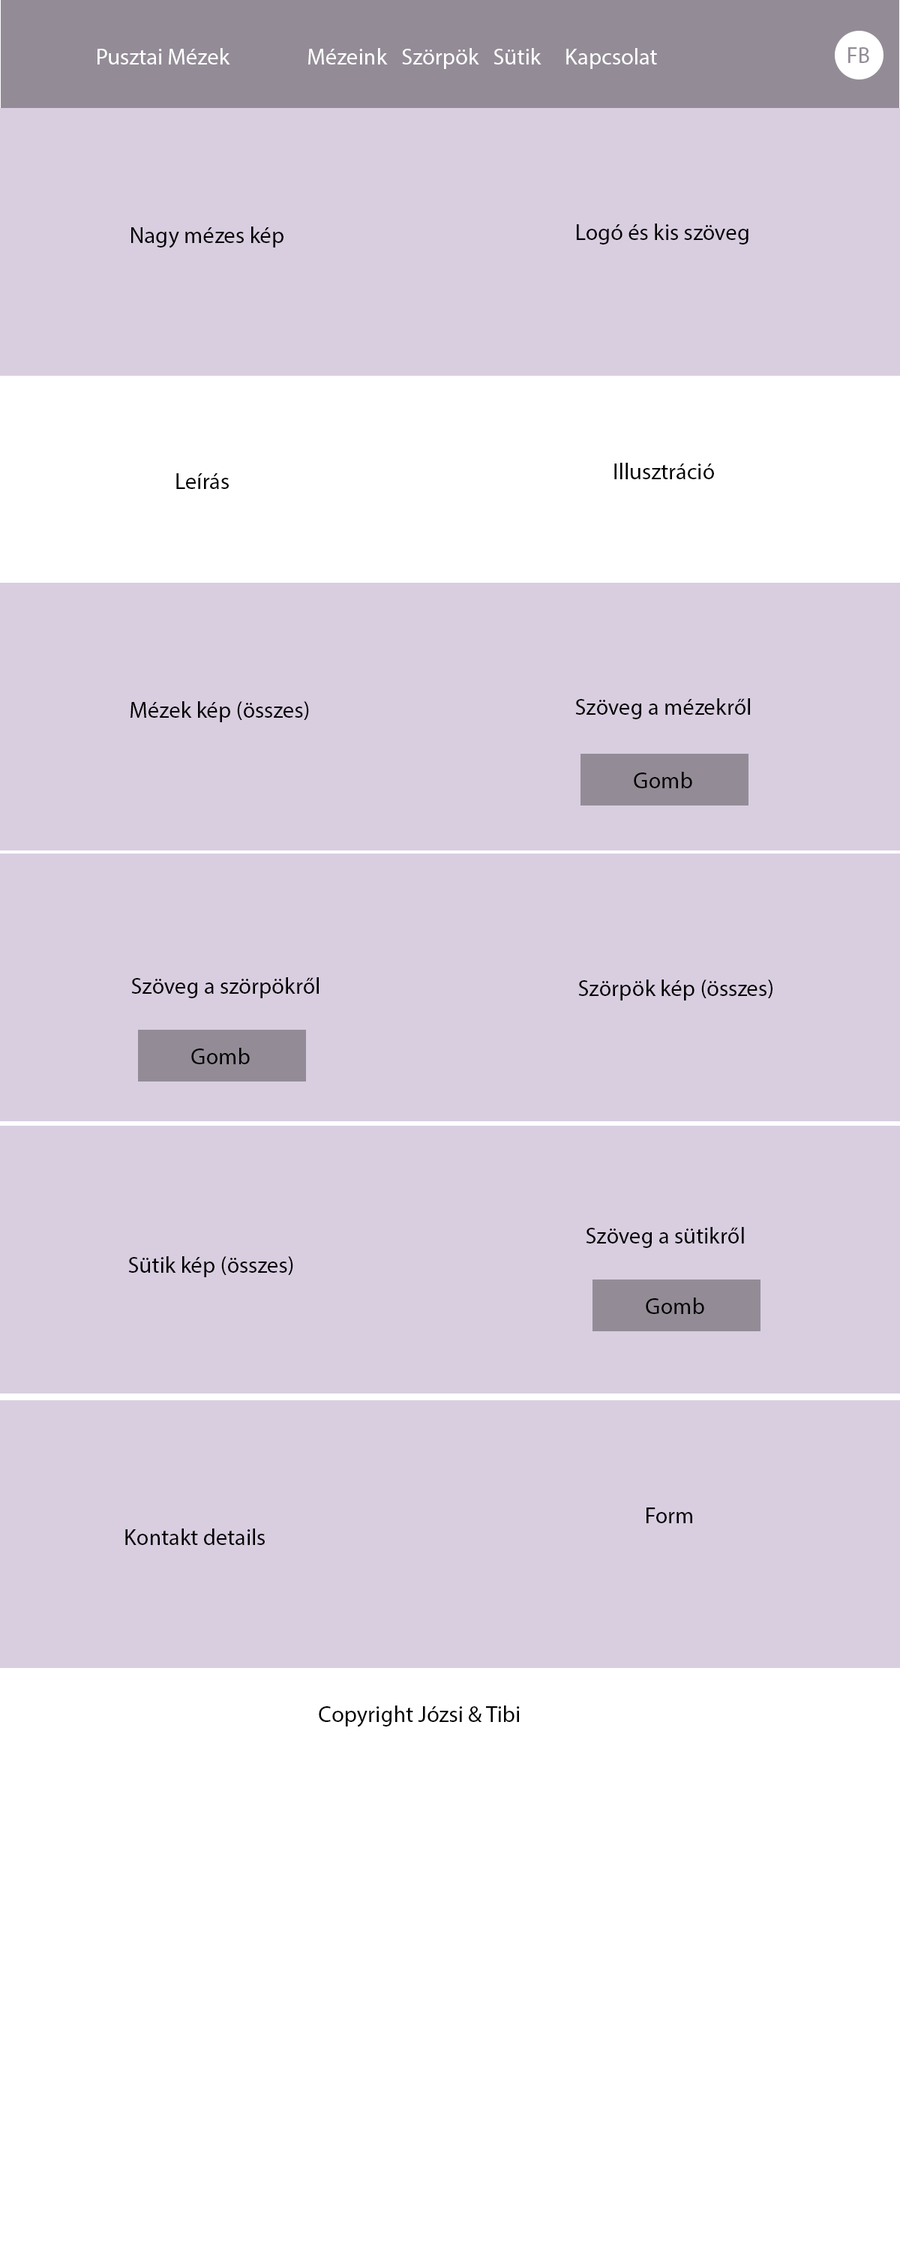
<style>
.page{position:relative;width:900px;height:2250px;background:#d9cee0}
.page>*{position:absolute;margin:0}
.t1{font:22.9px "MyriadPro-Regular";color:#ffffff}
.t2{font:9px/26.7px "MyriadPro-Regular";color:#938c97}
.t3{font:9px/26.7px "MyriadPro-Regular";color:#020202}
</style>
<div class="page">
<p class="t1" style="left:98px;top:48px;width:559px;height:21px">Pusztai Mézek                Mézeink   Szörpök   Sütik     Kapcsolat</p>
<p class="t2" style="left:848px;top:47px;width:21px;height:16px">FB</p>
<p class="t3" style="left:131px;top:226px;width:153px;height:22px">Nagy mézes kép</p>
<p class="t3" style="left:577px;top:224px;width:171px;height:20px">Logó és kis szöveg</p>
<p class="t3" style="left:176px;top:473px;width:53px;height:16px">Leírás</p>
<p class="t3" style="left:614px;top:463px;width:100px;height:16px">Illusztráció</p>
<p class="t3" style="left:130px;top:701px;width:179px;height:21px">Mézek kép (összes)</p>
<p class="t3" style="left:575px;top:698px;width:175px;height:21px">Szöveg a mézekről</p>
<p class="t3" style="left:634px;top:772px;width:58px;height:16px">Gomb</p>
<p class="t3" style="left:131px;top:977px;width:188px;height:21px">Szöveg a szörpökről</p>
<p class="t3" style="left:578px;top:980px;width:194px;height:20px">Szörpök kép (összes)</p>
<p class="t3" style="left:191px;top:1048px;width:59px;height:16px">Gomb</p>
<p class="t3" style="left:586px;top:1227px;width:158px;height:21px">Szöveg a sütikről</p>
<p class="t3" style="left:128px;top:1256px;width:165px;height:21px">Sütik kép (összes)</p>
<p class="t3" style="left:646px;top:1298px;width:58px;height:16px">Gomb</p>
<p class="t3" style="left:646px;top:1508px;width:46px;height:15px">Form</p>
<p class="t3" style="left:125px;top:1528px;width:140px;height:17px">Kontakt details</p>
<p class="t3" style="left:319px;top:1706px;width:201px;height:21px">Copyright Józsi &amp; Tibi</p>
</div>
